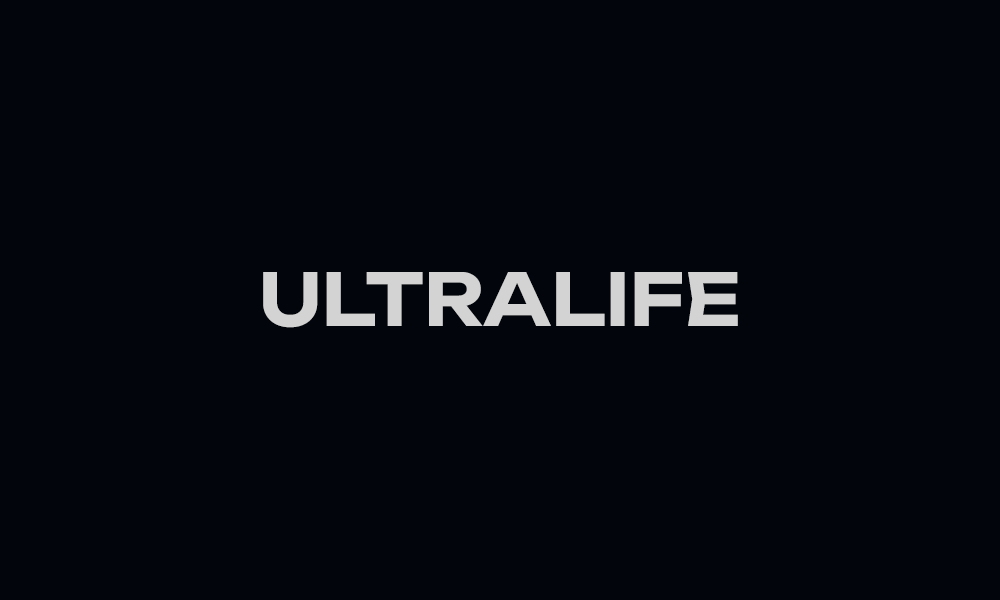
<style>
.page{position:relative;width:1000px;height:600px;background:#02060c}
.page>*{position:absolute;margin:0}
.t1{font:72px "Unbounded-SemiBold";color:#d3d3d3}
</style>
<div class="page">
<p class="t1" style="left:263px;top:272px;width:475px;height:56px">ULTRALIFE</p>
</div>
